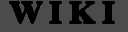
<style>
.page{position:relative;width:128px;height:32px;background:#4b4b4b}
.page>*{position:absolute;margin:0}
.t1{font:32px "TimesNewRomanPS-BoldMT";letter-spacing:0.25em;color:#000000}
</style>
<div class="page">
<p class="t1" style="left:10px;top:2px;width:104px;height:21px">WIKI</p>
</div>
